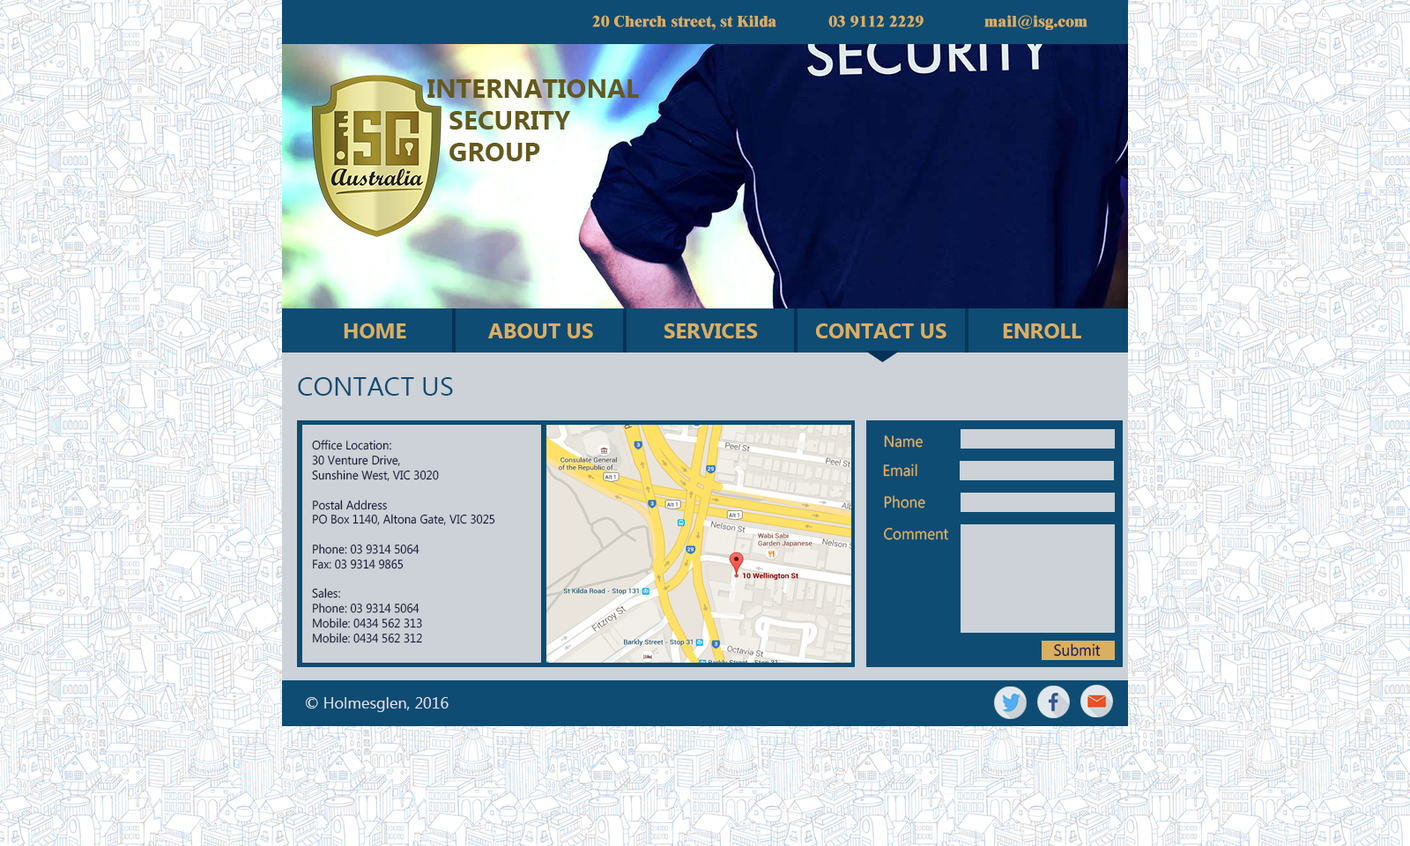
<style>
.page{position:relative;width:1410px;height:846px}
.page>*{position:absolute;margin:0}
.t1{font:15.9px "Dutch801BT-ExtraBold";color:#d9af62}
.t2{font:26.4px "Ebrima-Bold";color:#64591e}
.t3{font:26.4px "Ebrima-Bold";color:#ffffff}
.t4{font:21.1px "Ebrima-Bold";color:#d9af62}
.t5{font:26.4px "Ebrima";color:#0e4c73}
.t6{font:15.9px "Ebrima";color:#d9af62;scale:0.94 1}
.t7{font:12.3px "Ebrima";color:#161a3c;scale:0.94 1}
.t8{font:15.9px "Ebrima";color:#12155a;scale:0.94 1}
.t9{font:15.9px "Ebrima";color:#dfe0e7}
</style>
<div class="page">
<p class="t1" style="left:592px;top:15px;width:495px;height:16px">20 Cherch street, st Kilda            03 9112 2229              mail@isg.com</p>
<p class="t2" style="left:427px;top:79px;width:212px;height:82px">INTERNATIONAL<br>   SECURITY<br>   GROUP<span class="t3">P</span></p>
<p class="t4" style="left:344px;top:323px;width:62px;height:15px">HOME</p>
<p class="t4" style="left:488px;top:323px;width:105px;height:15px">ABOUT US</p>
<p class="t4" style="left:664px;top:323px;width:94px;height:15px">SERVICES</p>
<p class="t4" style="left:816px;top:323px;width:130px;height:15px">CONTACT US</p>
<p class="t4" style="left:1003px;top:323px;width:78px;height:15px">ENROLL</p>
<p class="t5" style="left:298px;top:377px;width:155px;height:19px">CONTACT US</p>
<p class="t6" style="left:884px;top:435px;width:39px;height:13px">Name</p>
<p class="t7" style="left:312px;top:440px;width:183px;height:203px">Office Location:<br>30 Venture Drive,<br>Sunshine West, VIC 3020<br><br>Postal Address<br>PO Box 1140, Altona Gate, VIC 3025<br><br>Phone: 03 9314 5064<br>Fax: 03 9314 9865<br><br>Sales:<br>Phone: 03 9314 5064<br>Mobile: 0434 562 313<br>Mobile: 0434 562 312</p>
<p class="t6" style="left:883px;top:463px;width:34px;height:14px">Email</p>
<p class="t6" style="left:884px;top:495px;width:41px;height:13px">Phone</p>
<p class="t6" style="left:884px;top:528px;width:64px;height:12px">Comment</p>
<p class="t8" style="left:1054px;top:643px;width:46px;height:13px">Submit</p>
<p class="t9" style="left:306px;top:697px;width:142px;height:15px">© Holmesglen, 2016</p>
</div>
